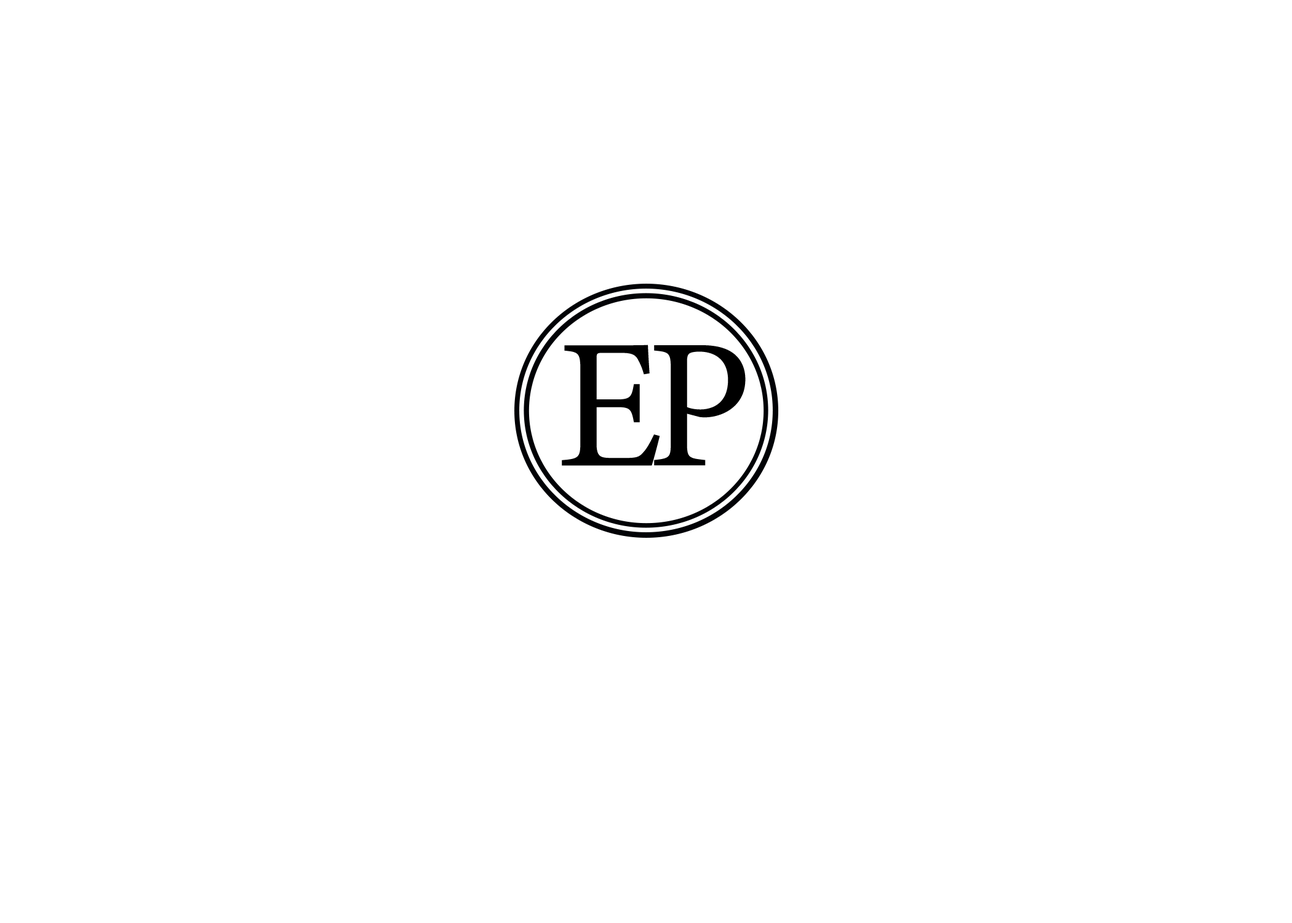
<style>
.page{position:relative;width:1292px;height:923px;background:#ffffff}
.page>*{position:absolute;margin:0}
.t1{font:184.6px "MinionVariableConcept-Roman";color:#000000}
</style>
<div class="page">
<p class="t1" style="left:562px;top:345px;width:98px;height:121px">E</p>
<p class="t1" style="left:654px;top:345px;width:92px;height:121px">P</p>
</div>
